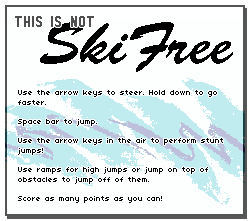
<style>
.page{position:relative;width:250px;height:221px;background:#fdffff}
.page>*{position:absolute;margin:0}
.t1{font:15px "PTF-NORDIC-Round";color:#4e4e4e}
.t2{font:60px "BrushScriptStd";color:#000000}
.t3{font:8px "04b03";color:#000000}
</style>
<div class="page">
<p class="t1" style="left:15px;top:16px;width:79px;height:11px">THIS IS NOT</p>
<p class="t2" style="left:40px;top:22px;width:193px;height:50px">SkiFree</p>
<p class="t3" style="left:18px;top:90px;width:205px;height:113px">Use the arrow keys to steer. Hold down to go faster.<br><br>Space bar to jump.<br><br>Use the arrow keys in the air to perform stunt jumps!<br><br>Use ramps for high jumps or jump on top of obstacles to jump off of them.<br><br>Score as many points as you can!</p>
</div>
